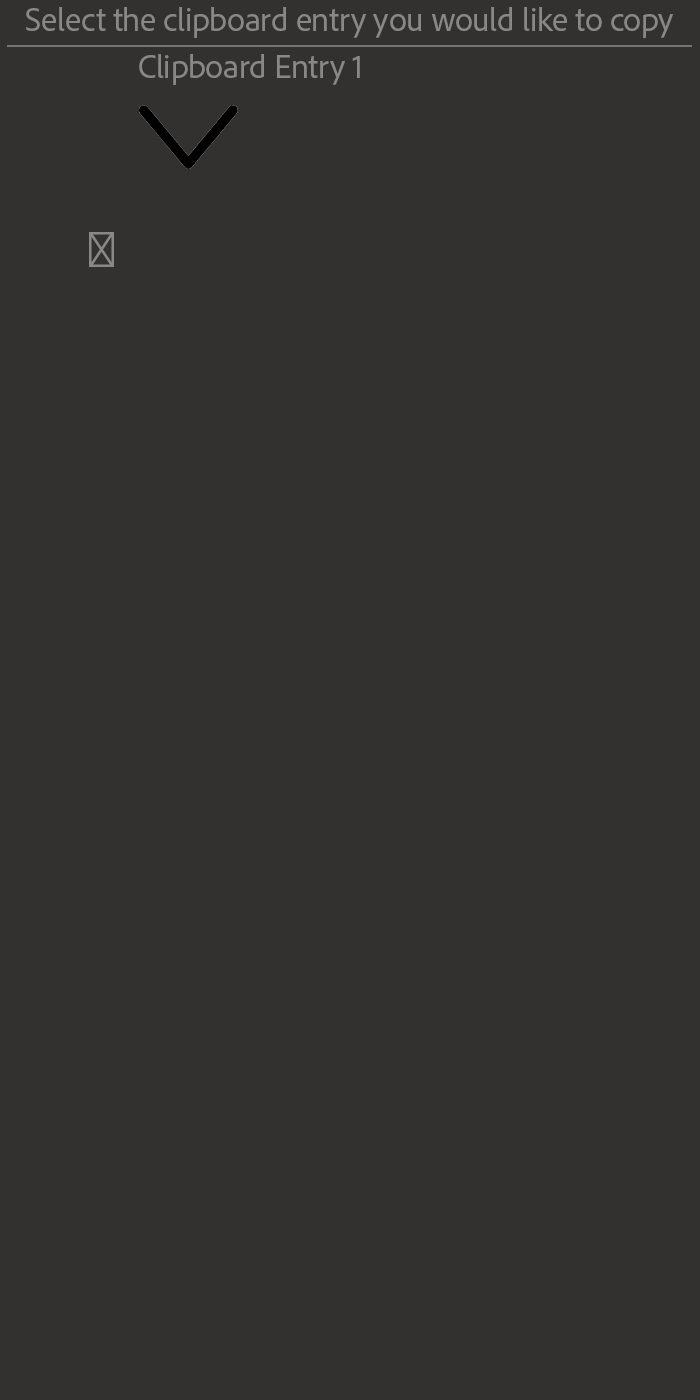
<style>
.page{position:relative;width:700px;height:1400px;background:#32312f}
.page>*{position:absolute;margin:0}
.t1{font:33.6px "AdobeClean-Regular";letter-spacing:-0.01em;color:#757575}
.t2{font:50px "MyriadPro-Regular";letter-spacing:-0.01em;color:#757575}
</style>
<div class="page">
<p class="t1" style="left:26px;top:7px;width:647px;height:31px">Select the clipboard entry you would like to copy</p>
<p class="t1" style="left:139px;top:54px;width:221px;height:31px">Clipboard Entry 1</p>
<p class="t2" style="left:89px;top:232px;width:25px;height:35px">⌘</p>
</div>
